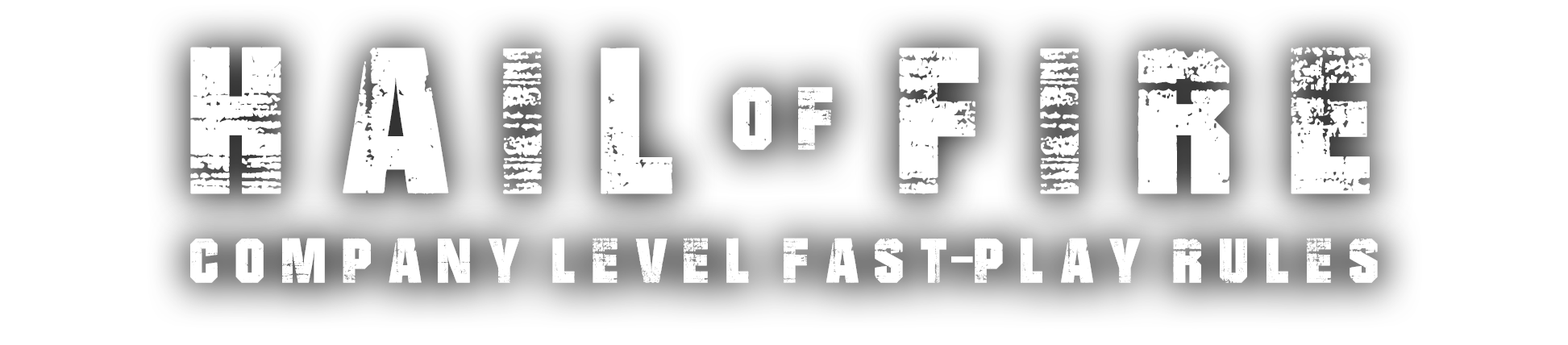
<style>
.page{position:relative;width:1568px;height:345px;background:#ffffff}
.page>*{position:absolute;margin:0}
.t1{font:282.2px "BADGRUNGE";color:#ffffff}
.t2{font:120.9px "BADGRUNGE";color:#ffffff}
.t3{font:85.5px "BADGRUNGE";color:#ffffff}
.t4{font:85.5px "MyriadPro-Regular";color:#ffffff}
</style>
<div class="page">
<p class="t1" style="left:190px;top:47px;width:1180px;height:147px">H A I L    F I R E</p>
<p class="t2" style="left:733px;top:87px;width:100px;height:63px">O F</p>
<p class="t3" style="left:190px;top:238px;width:1188px;height:45px">C o m p a n y  l e v e l  f a s t<span class="t4">-</span>p l a y  r u l e s</p>
</div>
